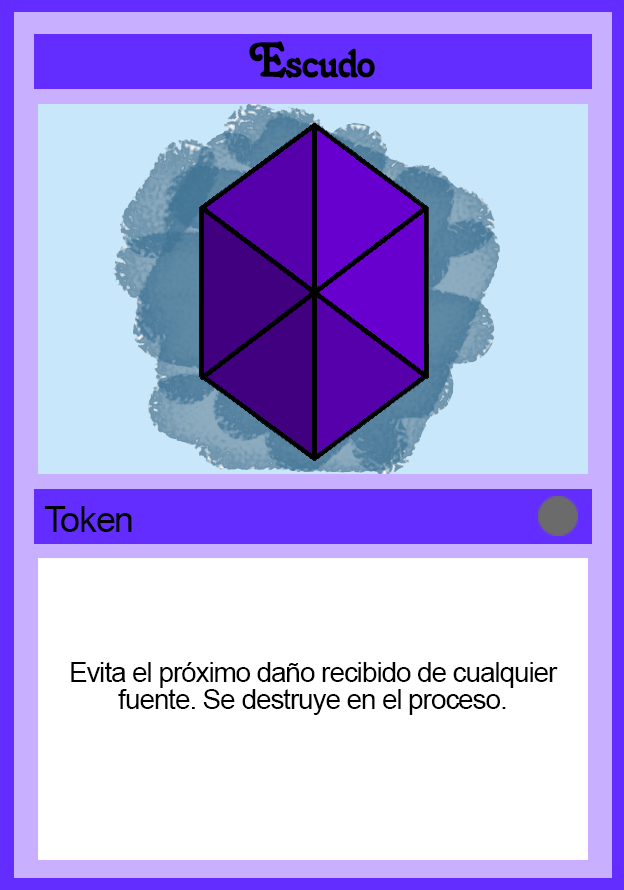
<style>
.page{position:relative;width:624px;height:890px;background:#ffffff}
.page>*{position:absolute;margin:0}
.t1{font:48px "Salina";letter-spacing:-0.04em;color:#000000}
.t2{font:36px "ArialMT";letter-spacing:-0.04em;color:#000000}
.t3{font:28px/27px "ArialMT";letter-spacing:-0.04em;color:#000000}
</style>
<div class="page">
<p class="t1" style="left:249px;top:41px;width:126px;height:37px">Escudo</p>
<p class="t2" style="left:44px;top:506px;width:88px;height:26px">Token</p>
<p class="t3" style="left:71px;top:662px;width:487px;height:53px;text-align:center">Evita el próximo daño recibido de cualquier fuente. Se destruye en el proceso.</p>
</div>
